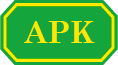
<style>
.page{position:relative;width:118px;height:65px;background:#14a63c}
.page>*{position:absolute;margin:0}
.t1{font:30px "CenturySchoolbook-Bold";color:#fee800}
</style>
<div class="page">
<p class="t1" style="left:24px;top:21px;width:71px;height:22px">APK</p>
</div>
